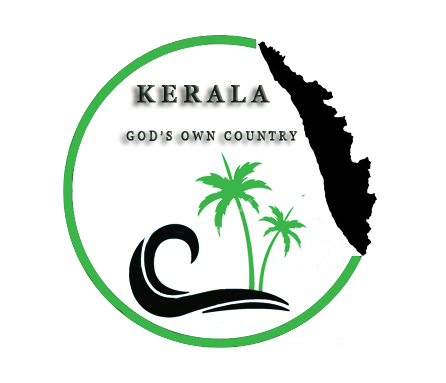
<style>
.page{position:relative;width:446px;height:383px;background:#ffffff}
.page>*{position:absolute;margin:0}
.t1{font:12px "Georgia";letter-spacing:0.25em;color:#1c2f1f;text-transform:uppercase;font-weight:bold;scale:0.93 1}
.t2{font:19.6px "Sylfaen";letter-spacing:0.25em;color:#070907;text-transform:uppercase;font-weight:bold;scale:0.93 1}
.t3{font:24px "Georgia-Bold";letter-spacing:0.25em;color:#1c2f1f;text-transform:uppercase;font-weight:bold;scale:0.93 1}
</style>
<div class="page">
<p class="t1" style="left:126px;top:85px;width:172px;height:56px"><span class="t2">      </span><span class="t3">kerala<br><br>       </span>GOD’S OWN COUNTRY</p>
</div>
